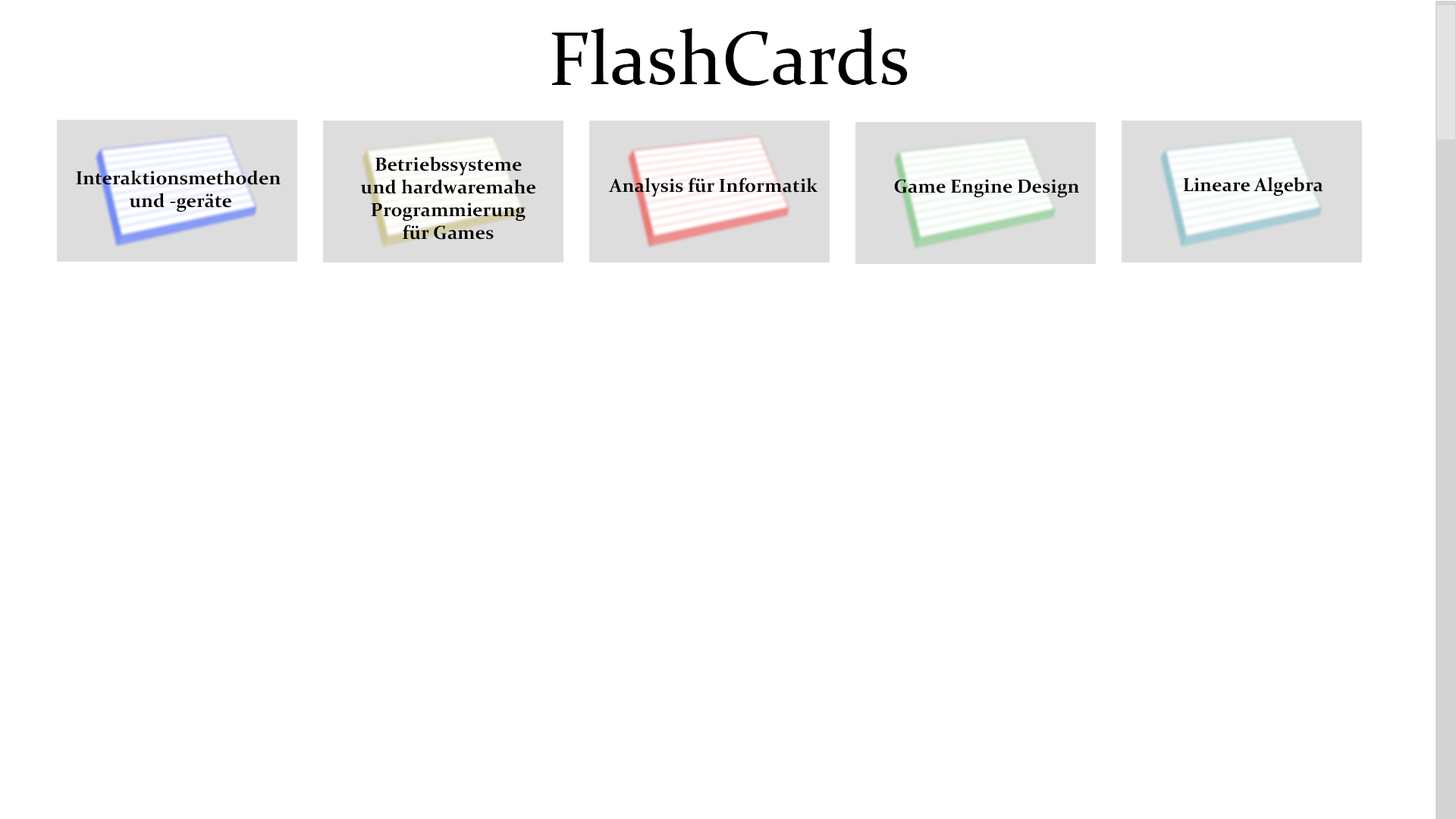
<style>
.page{position:relative;width:1456px;height:819px;background:#ffffff}
.page>*{position:absolute;margin:0}
.t1{font:75.8px "Constantia";color:#000000}
.t2{font:19px "Constantia-Bold";color:#000000}
</style>
<div class="page">
<p class="t1" style="left:551px;top:28px;width:357px;height:58px">FlashCards</p>
<p class="t2" style="left:360px;top:156px;width:175px;height:84px;text-align:center">Betriebssysteme<br>und hardwaremahe<br>Programmierung<br>für Games</p>
<p class="t2" style="left:76px;top:170px;width:205px;height:42px;text-align:center">Interaktionsmethoden <br>und -geräte</p>
<p class="t2" style="left:608px;top:177px;width:210px;height:19px">Analysis für Informatik</p>
<p class="t2" style="left:894px;top:179px;width:186px;height:19px">Game Engine Design</p>
<p class="t2" style="left:1183px;top:177px;width:140px;height:19px">Lineare Algebra</p>
</div>
